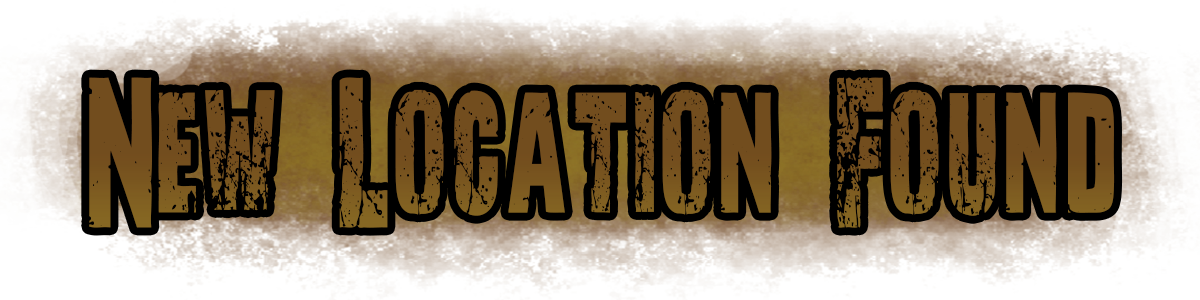
<style>
.page{position:relative;width:1200px;height:300px}
.page>*{position:absolute;margin:0}
.t1{font:227.5px "NoRverence-Regular";color:#724d1e;scale:0.59 1}
</style>
<div class="page">
<p class="t1" style="left:89px;top:77px;width:1026px;height:151px">New Location Found</p>
</div>
